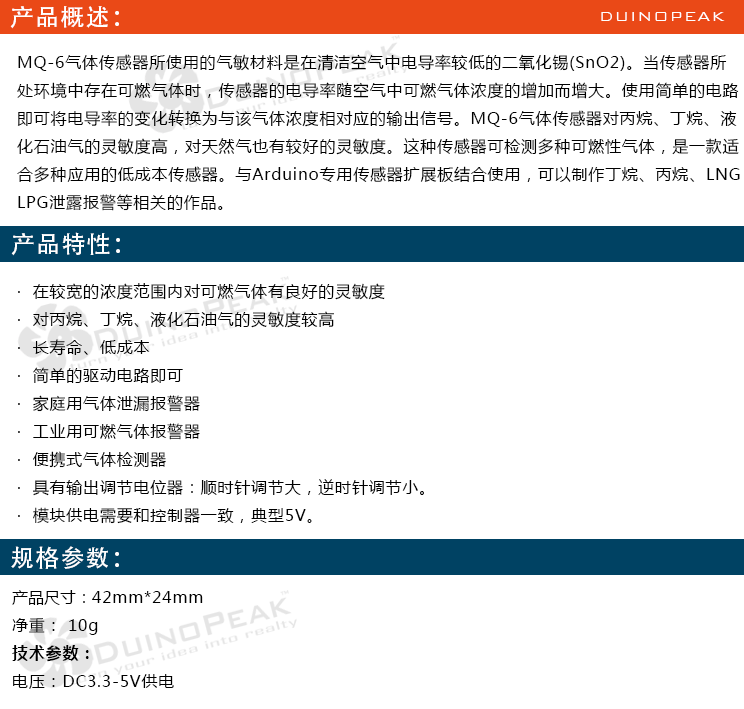
<style>
.page{position:relative;width:744px;height:709px;background:#ffffff}
.page>*{position:absolute;margin:0}
.t1{font:24px "AdobeHeitiStd-Regular";letter-spacing:0.05em;color:#ffffff}
.t2{font:18px "BankGothicBT-Light";letter-spacing:0.05em;color:#ffffff}
.t3{font:16px "MicrosoftYaHei";letter-spacing:0.05em;color:#000000}
.t4{font:16px "MicrosoftYaHei";color:#000000}
.t5{font:16px "MicrosoftYaHei-Bold";letter-spacing:0.05em;color:#000000}
</style>
<div class="page">
<p class="t1" style="left:10px;top:6px;width:109px;height:23px">产品概述：</p>
<p class="t2" style="left:601px;top:12px;width:124px;height:9px">DUINOPEAK</p>
<p class="t3" style="left:17px;top:54px;width:723px;height:157px">MQ-6气体传感器所使用的气敏材料是在清洁空气中电导率较低的二氧化锡(SnO2)。当传感器所<br>处环境中存在可燃气体时，传感器的电导率随空气中可燃气体浓度的增加而增大。使用简单的电路<br>即可将电导率的变化转换为与该气体浓度相对应的输出信号。MQ-6气体传感器对丙烷、丁烷、液<br>化石油气的灵敏度高，对天然气也有较好的灵敏度。这种传感器可检测多种可燃性气体，是一款适<br>合多种应用的低成本传感器。与Arduino专用传感器扩展板结合使用，可以制作丁烷、丙烷、LNG<br>LPG泄露报警等相关的作品。</p>
<p class="t1" style="left:11px;top:232px;width:109px;height:24px">产品特性：</p>
<p class="t3" style="left:18px;top:283px;width:406px;height:241px">·  在较宽的浓度范围内对可燃气体有良好的灵敏度     <br>·  对丙烷、丁烷、液化石油气的灵敏度较高                                     <br>·  长寿命、低成本                                          <br>·  简单的驱动电路即可<br>·  家庭用气体泄漏报警器<br>·  工业用可燃气体报警器<br>·  便携式气体检测器<br>·  具有输出调节电位器：顺时针调节大，逆时针调节小。<br>·  模块供电需要和控制器一致，典型5V。</p>
<p class="t1" style="left:11px;top:546px;width:108px;height:23px">规格参数：</p>
<p class="t3" style="left:12px;top:590px;width:191px;height:99px"><span class="t4">产品尺寸：</span>42mm*24mm<br>净重： 10g<br><span class="t5">技术参数：<br></span>电压：DC3.3-5V供电</p>
</div>
